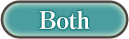
<style>
.page{position:relative;width:129px;height:39px;background:#4a9e9f}
.page>*{position:absolute;margin:0}
.t1{font:24px "RyuminPro-ExBold";letter-spacing:-0.04em;color:#ffffff}
</style>
<div class="page">
<p class="t1" style="left:39px;top:10px;width:51px;height:20px">Both</p>
</div>
